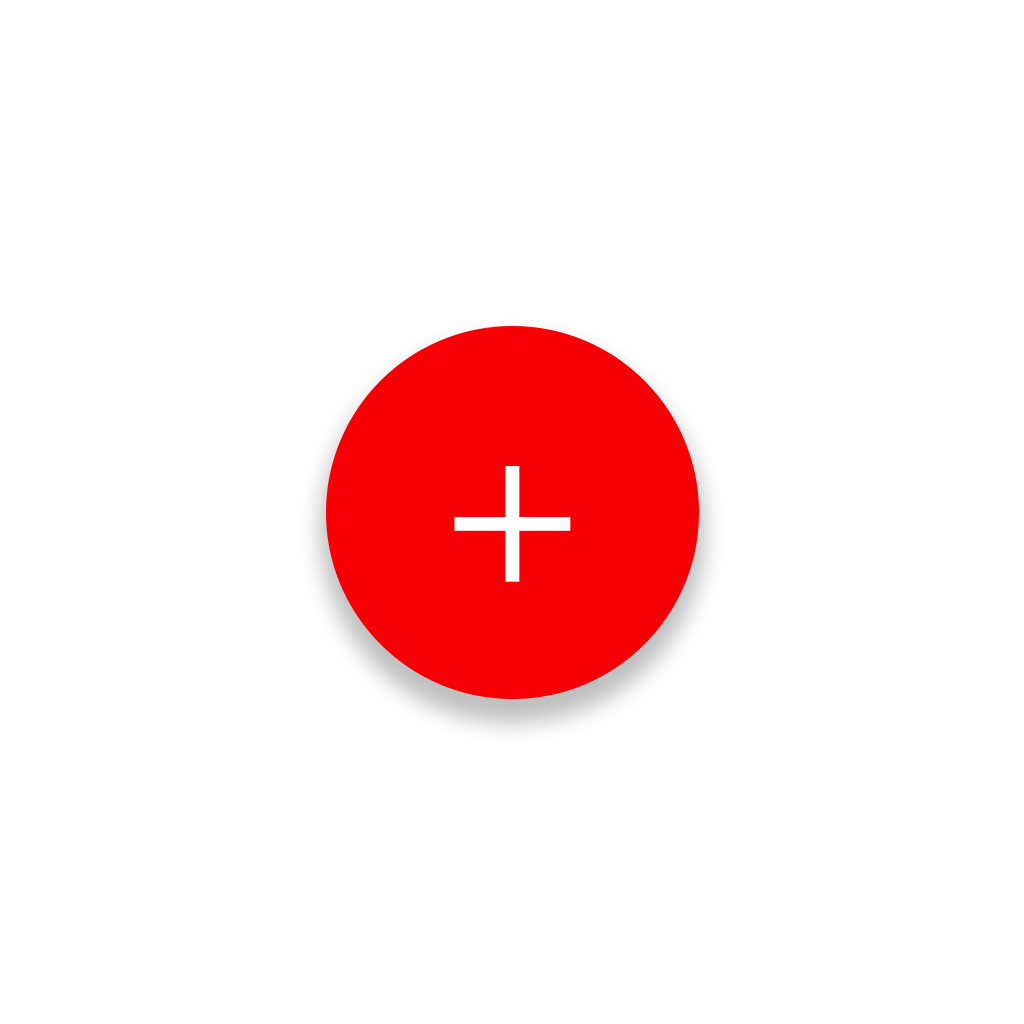
<style>
.page{position:relative;width:1024px;height:1024px;background:#ffffff}
.page>*{position:absolute;margin:0}
.t1{font:256px "SegoeUI-Semilight";color:#ffffff}
</style>
<div class="page">
<p class="t1" style="left:454px;top:466px;width:117px;height:116px">+</p>
</div>
